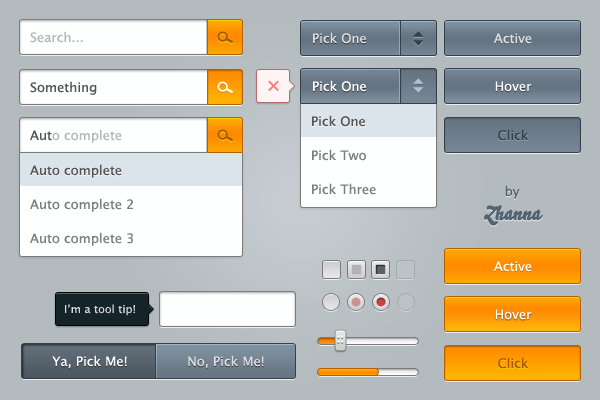
<style>
.page{position:relative;width:600px;height:400px;background:#b3bbbf}
.page>*{position:absolute;margin:0}
.t1{font:13px "LucidaGrande";color:#b4b6b8}
.t2{font:13px "LucidaGrande";color:#dddedf}
.t3{font:13px "LucidaGrande";color:#545455}
.t4{font:13px "LucidaGrande";color:#ffffff}
.t5{font:13px "LucidaGrande";color:#fefefe}
.t6{font:13px "LucidaGrande";color:#35404a}
.t7{font:13px "LucidaGrande";color:#7d7f7e}
.t8{font:13px "LucidaGrande";color:#fffdef}
.t9{font:11px "LucidaGrande";color:#d7d8d9}
.t10{font:13px "LucidaGrande";color:#a45900}
</style>
<div class="page">
<p class="t1" style="left:30px;top:31px;width:53px;height:12px">Search...</p>
<p class="t2" style="left:313px;top:32px;width:53px;height:12px">Pick One</p>
<p class="t2" style="left:493px;top:33px;width:39px;height:11px">Active</p>
<p class="t3" style="left:30px;top:81px;width:67px;height:14px">Something</p>
<p class="t4" style="left:313px;top:80px;width:53px;height:12px">Pick One</p>
<p class="t5" style="left:495px;top:81px;width:37px;height:11px">Hover</p>
<p class="t3" style="left:312px;top:115px;width:53px;height:12px">Pick One</p>
<p class="t1" style="left:30px;top:129px;width:92px;height:14px"><span class="t3">Aut</span>o complete</p>
<p class="t6" style="left:498px;top:129px;width:31px;height:12px">Click</p>
<p class="t7" style="left:312px;top:149px;width:54px;height:12px">Pick Two</p>
<p class="t3" style="left:30px;top:164px;width:92px;height:14px">Auto complete</p>
<p class="t7" style="left:312px;top:183px;width:64px;height:12px">Pick Three</p>
<p class="t7" style="left:30px;top:198px;width:103px;height:14px">Auto complete 2</p>
<p class="t7" style="left:30px;top:232px;width:103px;height:14px">Auto complete 3</p>
<p class="t8" style="left:493px;top:261px;width:39px;height:11px">Active</p>
<p class="t9" style="left:65px;top:304px;width:70px;height:12px">I’m a tool tip!</p>
<p class="t5" style="left:495px;top:309px;width:37px;height:11px">Hover</p>
<p class="t4" style="left:52px;top:355px;width:75px;height:14px">Ya, Pick Me!</p>
<p class="t2" style="left:188px;top:355px;width:76px;height:14px">No, Pick Me!</p>
<p class="t10" style="left:498px;top:357px;width:31px;height:12px">Click</p>
</div>
